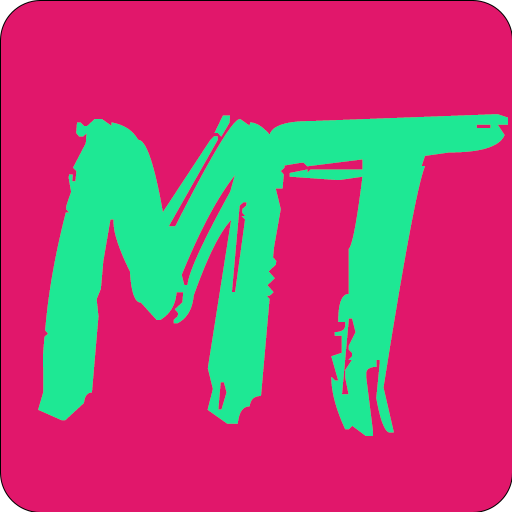
<style>
.page{position:relative;width:512px;height:512px;background:#e1176b}
.page>*{position:absolute;margin:0}
.t1{font:416.7px "EdoSZHQ-Regular";color:#1ee894}
</style>
<div class="page">
<p class="t1" style="left:38px;top:114px;width:470px;height:322px">MT</p>
</div>
